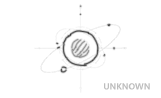
<style>
.page{position:relative;width:161px;height:98px;background:#ffffff}
.page>*{position:absolute;margin:0}
.t1{font:8px "MicrosoftYaHei-Bold";color:#bdbdbd}
</style>
<div class="page">
<p class="t1" style="left:104px;top:83px;width:46px;height:7px">UNKNOWN</p>
</div>
